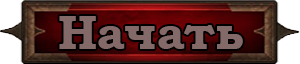
<style>
.page{position:relative;width:300px;height:64px}
.page>*{position:absolute;margin:0}
.t1{font:47.7px "BookmanOldStyle-Bold";color:#846969}
</style>
<div class="page">
<p class="t1" style="left:59px;top:16px;width:184px;height:33px">Начать</p>
</div>
